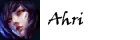
<style>
.page{position:relative;width:140px;height:40px;background:#ffffff}
.page>*{position:absolute;margin:0}
.t1{font:16px "VinerHandITC";color:#000000}
</style>
<div class="page">
<p class="t1" style="left:48px;top:11px;width:36px;height:15px">Ahri</p>
</div>
